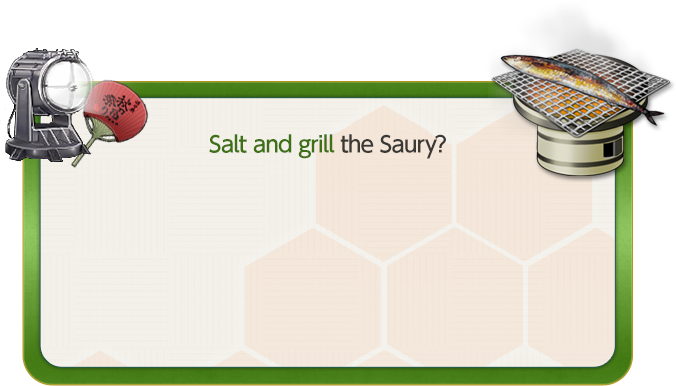
<style>
.page{position:relative;width:676px;height:386px;background:#ffffff}
.page>*{position:absolute;margin:0}
.t1{font:22px "UDShinGoPro-Medium";letter-spacing:-0.04em;color:#3e7115}
.t2{font:22px "UDShinGoPro-Medium";letter-spacing:-0.04em;color:#3b3935}
</style>
<div class="page">
<p class="t1" style="left:209px;top:134px;width:237px;height:25px">Salt and grill<span class="t2"> the Saury?</span></p>
</div>
